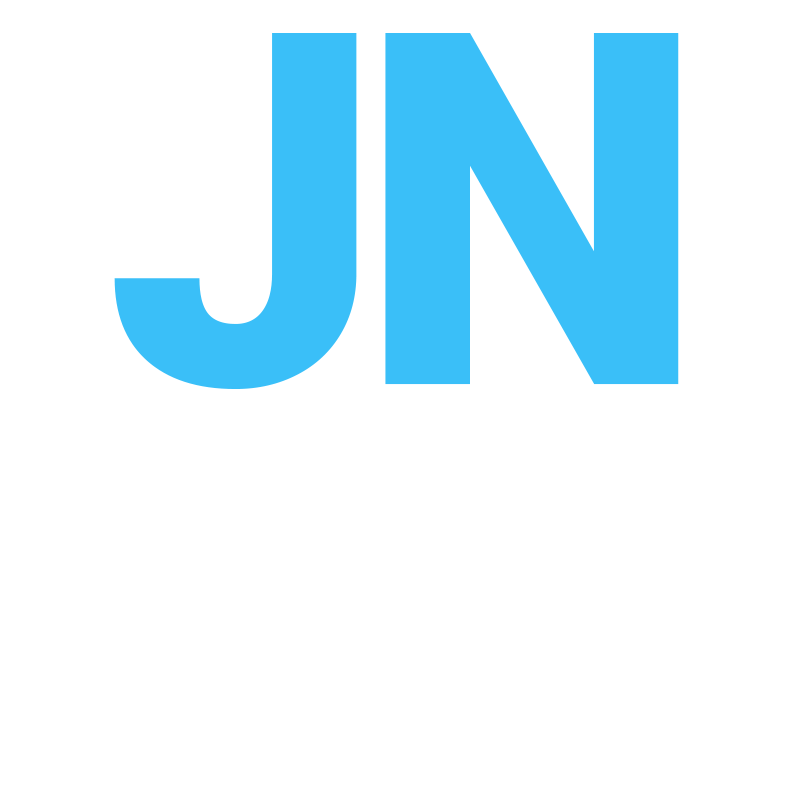
<style>
.page{position:relative;width:800px;height:800px;background:#ffffff}
.page>*{position:absolute;margin:0}
.t1{font:492.7px "Roboto-Black";letter-spacing:-0.05em;color:#3abff8}
</style>
<div class="page">
<p class="t1" style="left:114px;top:33px;width:565px;height:356px">JN</p>
</div>
